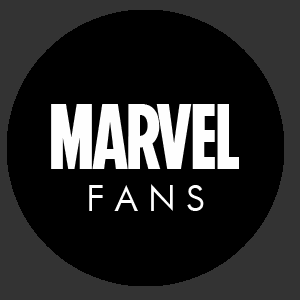
<style>
.page{position:relative;width:300px;height:300px;background:#000000}
.page>*{position:absolute;margin:0}
.t1{font:93px "Marvel-Regular";color:#fefefe}
.t2{font:36px "FuturaBT-Book";color:#fefefe}
</style>
<div class="page">
<p class="t1" style="left:51px;top:104px;width:188px;height:65px">MARVEL</p>
<p class="t2" style="left:89px;top:184px;width:115px;height:27px">F A N S</p>
</div>
